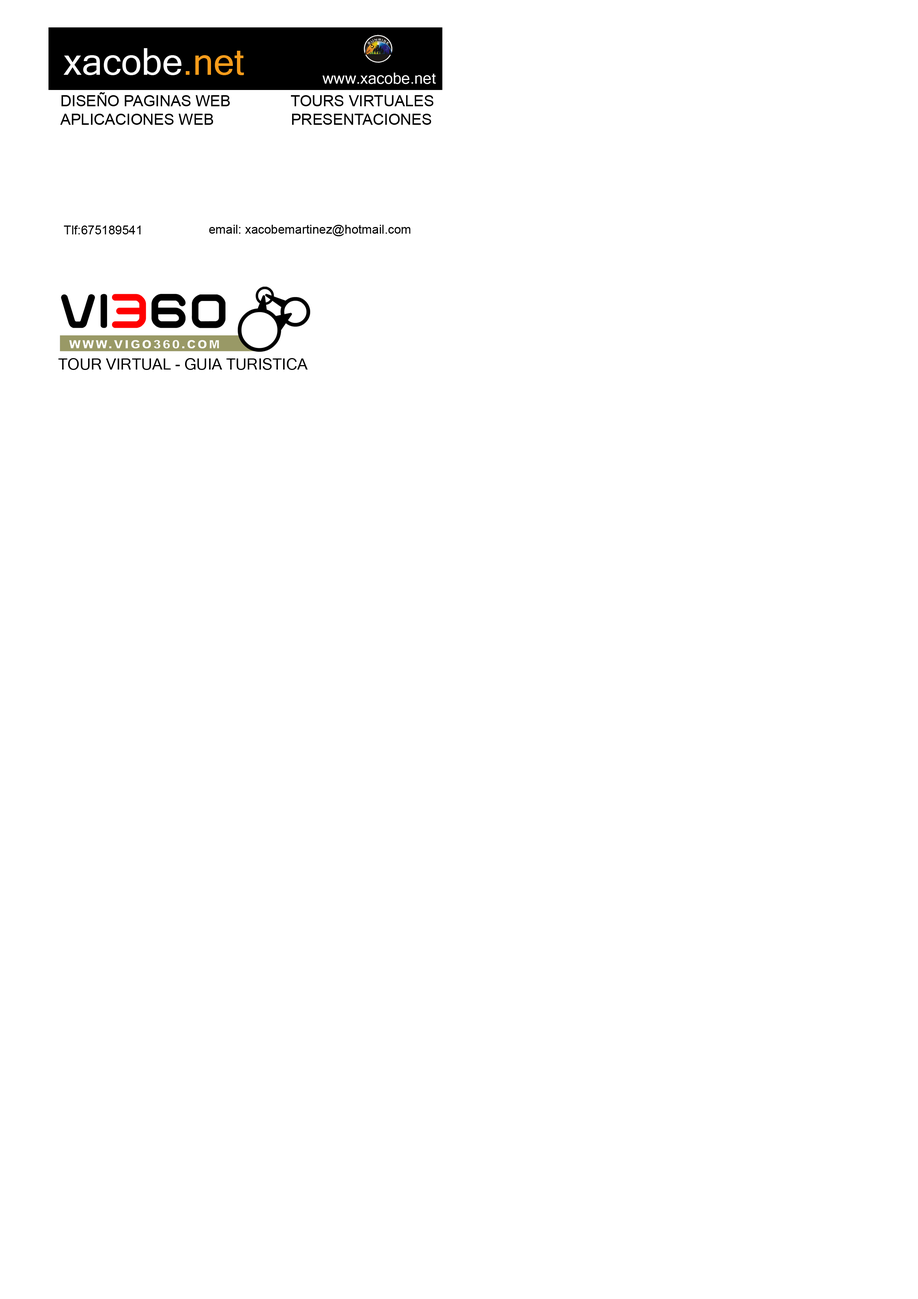
<style>
.page{position:relative;width:918px;height:1299px;background:#ffffff}
.page>*{position:absolute;margin:0}
.t1{font:37px "MicrosoftSansSerif";color:#ffffff}
.t2{font:37px "MicrosoftSansSerif";color:#f79c1b}
.t3{font:15.4px "MicrosoftSansSerif";color:#ffffff}
.t4{font:15.4px "ArialMT";color:#000000}
.t5{font:12.3px "ArialMT";color:#000000}
.t6{font:15.4px "MicrosoftSansSerif";color:#000000}
</style>
<div class="page">
<p class="t1" style="left:63px;top:48px;width:181px;height:27px">xacobe<span class="t2">.net</span></p>
<p class="t3" style="left:322px;top:73px;width:114px;height:11px">www.xacobe.net</p>
<p class="t4" style="left:60px;top:92px;width:374px;height:33px">DISEÑO PAGINAS WEB              TOURS VIRTUALES<br>APLICACIONES WEB                  PRESENTACIONES</p>
<p class="t5" style="left:64px;top:225px;width:77px;height:9px">Tlf:675189541</p>
<p class="t5" style="left:209px;top:225px;width:202px;height:11px">email: xacobemartinez@hotmail.com</p>
<p class="t6" style="left:58px;top:358px;width:250px;height:12px">TOUR VIRTUAL - GUIA TURISTICA</p>
</div>
